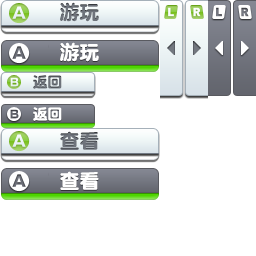
<style>
.page{position:relative;width:256px;height:256px;background:#ffffff}
.page>*{position:absolute;margin:0}
.t1{font:20px "DFPYuanW9";color:#6e737b}
.t2{font:20px "DFPYuanW9";color:#ffffff}
.t3{font:14.7px "DFPYuanW9";color:#6e737b}
.t4{font:14.7px "DFPYuanW9";color:#ffffff}
</style>
<div class="page">
<p class="t1" style="left:60px;top:2px;width:39px;height:20px">游玩</p>
<p class="t2" style="left:60px;top:42px;width:39px;height:20px">游玩</p>
<p class="t3" style="left:33px;top:75px;width:29px;height:14px">返回</p>
<p class="t4" style="left:33px;top:107px;width:29px;height:14px">返回</p>
<p class="t1" style="left:60px;top:131px;width:39px;height:19px">查看</p>
<p class="t2" style="left:60px;top:171px;width:39px;height:19px">查看</p>
</div>
